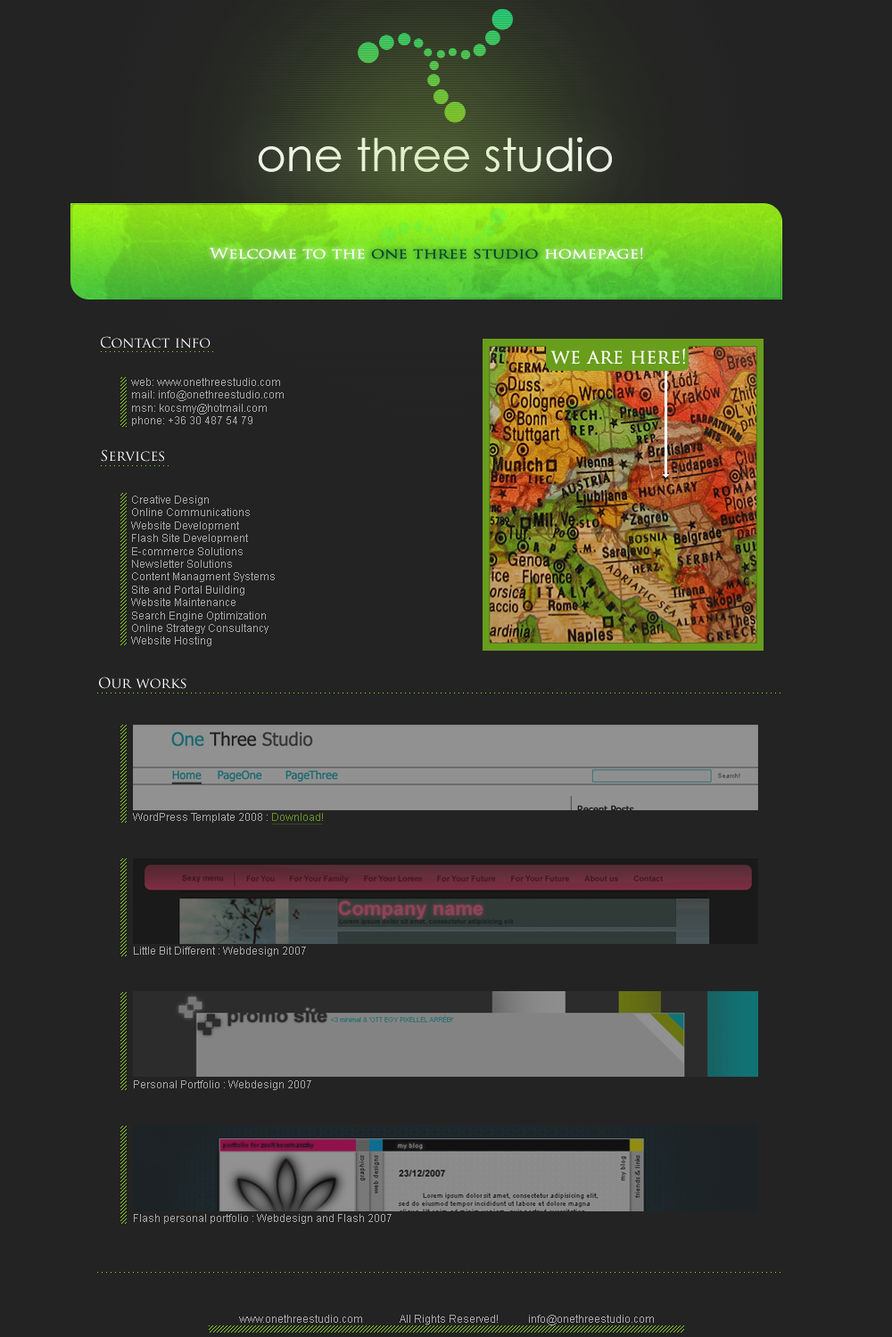
<style>
.page{position:relative;width:892px;height:1337px;background:#232323}
.page>*{position:absolute;margin:0}
.t1{font:14.2px "TrajanPro-Regular";color:#00462d;scale:1.2 1}
.t2{font:14.2px "TrajanPro-Regular";color:#ffffff;scale:1.2 1}
.t3{font:14.3px "TrajanPro-Regular";color:#ffffff}
.t4{font:19.6px "TrajanPro-Regular";color:#ffffff}
.t5{font:10.7px "ArialMT";color:#a7a7a7}
</style>
<div class="page">
<p class="t1" style="left:209px;top:247px;width:434px;height:12px"><span class="t2">Welcome to the </span>one three studio<span class="t2"> homepage!</span></p>
<p class="t3" style="left:101px;top:336px;width:109px;height:13px">Contact info</p>
<p class="t4" style="left:550px;top:349px;width:135px;height:16px">we are here!</p>
<p class="t5" style="left:131px;top:378px;width:153px;height:48px">web: www.onethreestudio.com<br>mail: info@onethreestudio.com<br>msn: kocsmy@hotmail.com<br>phone: +36 30 487 54 79</p>
<p class="t3" style="left:101px;top:449px;width:63px;height:13px">Services</p>
<p class="t5" style="left:131px;top:496px;width:144px;height:150px">Creative Design<br>Online Communications<br>Website Development<br>Flash Site Development<br>E-commerce Solutions<br>Newsletter Solutions<br>Content Managment Systems<br>Site and Portal Building<br>Website Maintenance<br>Search Engine Optimization<br>Online Strategy Consultancy<br>Website Hosting</p>
<p class="t3" style="left:99px;top:677px;width:87px;height:12px">Our works</p>
<p class="t5" style="left:133px;top:813px;width:190px;height:10px">WordPress Template 2008 : Download!</p>
<p class="t5" style="left:134px;top:947px;width:172px;height:10px">Little Bit Different : Webdesign 2007</p>
<p class="t5" style="left:134px;top:1081px;width:177px;height:9px">Personal Portfolio : Webdesign 2007</p>
<p class="t5" style="left:134px;top:1214px;width:257px;height:10px">Flash personal portfolio : Webdesign and Flash 2007</p>
<p class="t5" style="left:239px;top:1315px;width:415px;height:11px">www.onethreestudio.com  All Rights Reserved! info@onethreestudio.com</p>
</div>
